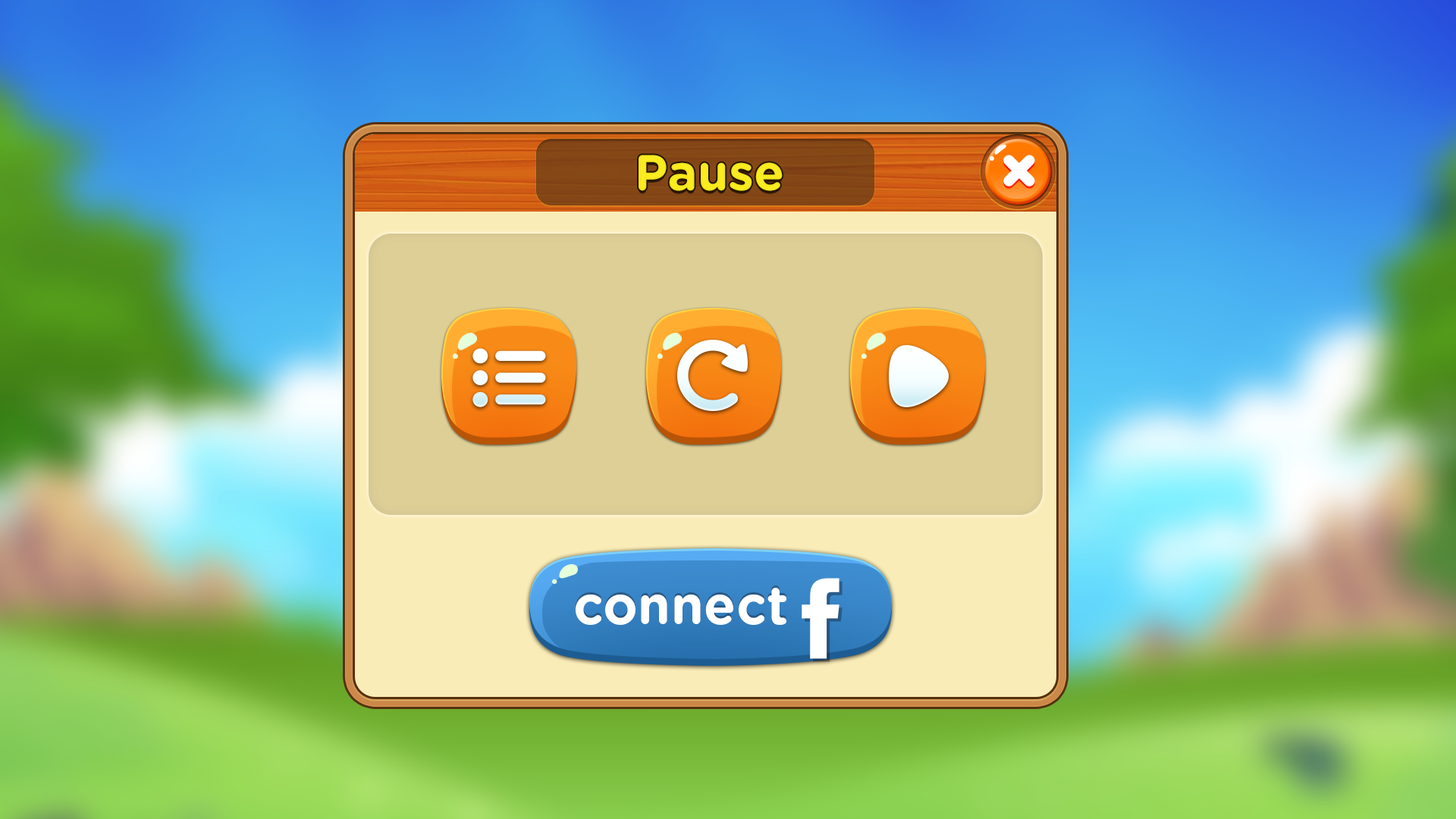
<style>
.page{position:relative;width:1456px;height:819px}
.page>*{position:absolute;margin:0}
.t1{font:50px "GothamRounded-Bold";color:#fff31e}
.t2{font:53.1px "GothamRounded-Bold";letter-spacing:-0.025em;color:#ffffff}
</style>
<div class="page">
<p class="t1" style="left:639px;top:155px;width:144px;height:36px;opacity:0.95">Pause</p>
<p class="t2" style="left:576px;top:588px;width:210px;height:37px">connect</p>
</div>
